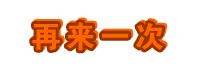
<style>
.page{position:relative;width:199px;height:74px;background:#ffffff}
.page>*{position:absolute;margin:0}
.t1{font:30px "Jdahei";letter-spacing:0.15em;color:#ff6400}
.t2{font:30px "Jdahei";letter-spacing:0.15em}
</style>
<div class="page">
<p class="t1" style="left:32px;top:22px;width:131px;height:29px">再来一次</p>
<p class="t2" style="left:34px;top:20px;width:131px;height:29px">再来一次</p>
</div>
